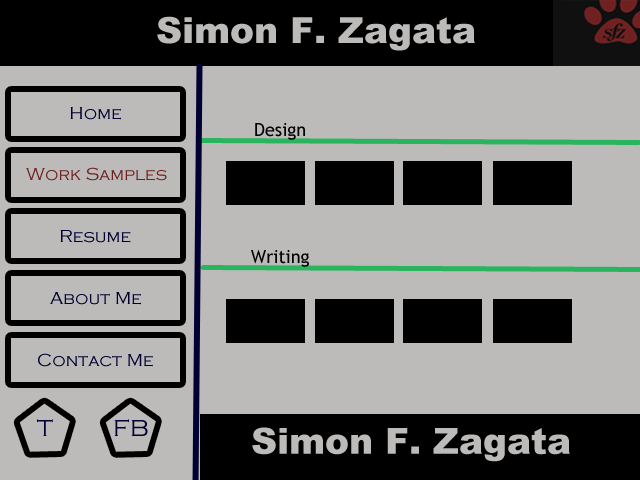
<style>
.page{position:relative;width:640px;height:480px;background:#bcbbb9}
.page>*{position:absolute;margin:0}
.t1{font:36px "Arial-Black";color:#bcbbb9}
.t2{font:18px "CopperplateGothic-Light";color:#000032}
.t3{font:18px "TrebuchetMS";color:#000000}
.t4{font:18px "CopperplateGothic-Light";color:#6f2121}
.t5{font:24px "CopperplateGothic-Light";color:#000032}
</style>
<div class="page">
<p class="t1" style="left:157px;top:16px;width:318px;height:35px">Simon F. Zagata</p>
<p class="t2" style="left:70px;top:107px;width:51px;height:13px">Home</p>
<p class="t3" style="left:255px;top:123px;width:50px;height:17px">Design</p>
<p class="t4" style="left:26px;top:167px;width:141px;height:14px">Work Samples</p>
<p class="t2" style="left:60px;top:230px;width:71px;height:13px">Resume</p>
<p class="t3" style="left:251px;top:250px;width:58px;height:17px">Writing</p>
<p class="t2" style="left:50px;top:292px;width:91px;height:13px">About Me</p>
<p class="t2" style="left:38px;top:353px;width:115px;height:14px">Contact Me</p>
<p class="t5" style="left:37px;top:419px;width:16px;height:17px">T</p>
<p class="t5" style="left:114px;top:419px;width:34px;height:17px">FB</p>
<p class="t1" style="left:252px;top:427px;width:318px;height:35px">Simon F. Zagata</p>
</div>
